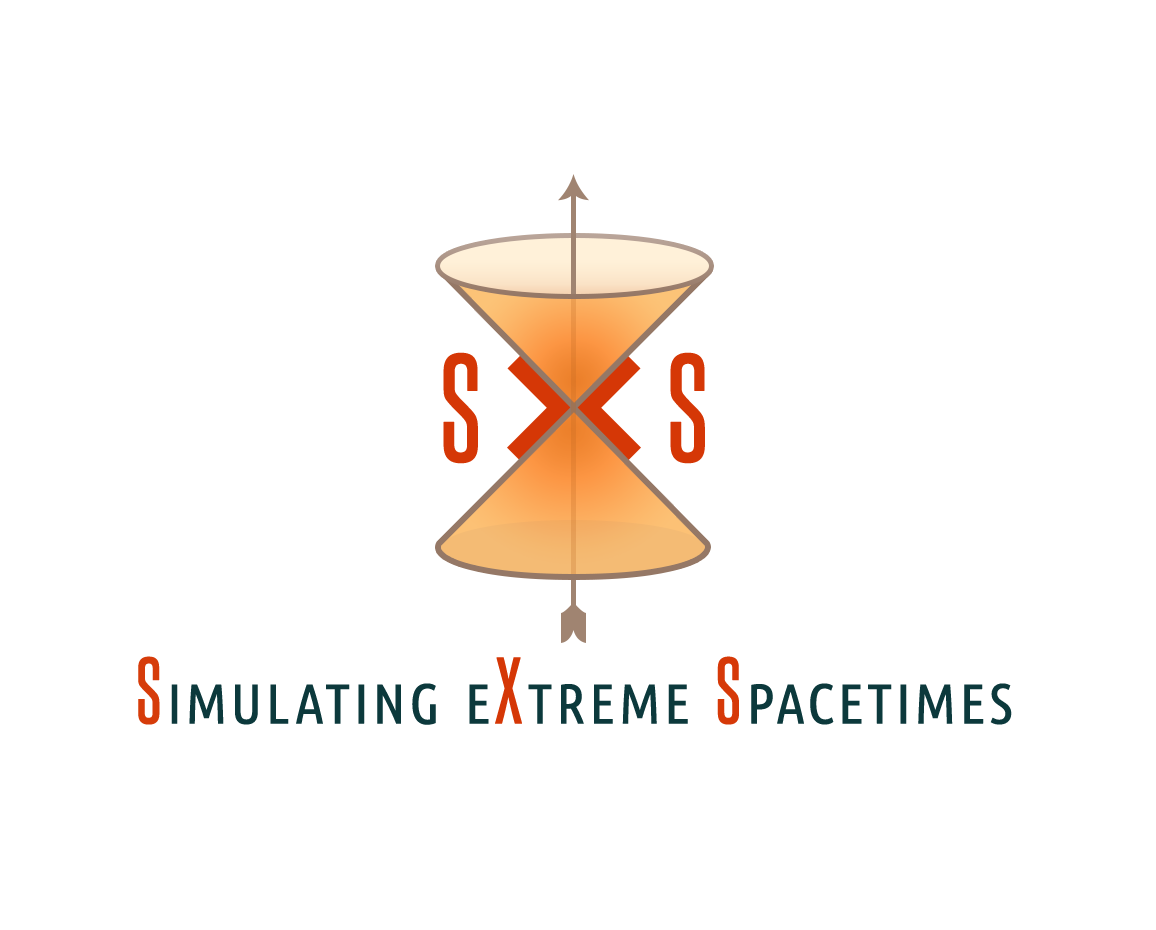
<style>
.page{position:relative;width:1156px;height:930px;background:#ffffff}
.page>*{position:absolute;margin:0}
.t1{font:130px "SteelfishRg-Regular";letter-spacing:0.23em;color:#d53706;font-weight:bold}
.t2{font:80px "UbuntuCondensed-Regular";letter-spacing:0.05em;color:#0c393c;font-variant:small-caps;font-weight:bold}
.t3{font:80px "UbuntuCondensed-Regular";letter-spacing:0.05em;color:#d63c0a;font-variant:small-caps;font-weight:bold}
.t4{font:80px "SteelfishRg-Regular";letter-spacing:0.05em;color:#d63c0a;font-variant:small-caps;font-weight:bold}
.t5{font:80px "SteelfishRg-Regular";letter-spacing:0.05em;color:#d53706;font-variant:small-caps;font-weight:bold}
.t6{font:80px "SteelfishRg-Regular";letter-spacing:0.05em;color:#d63908;font-variant:small-caps;font-weight:bold}
</style>
<div class="page">
<p class="t1" style="left:443px;top:352px;width:262px;height:112px">S   S</p>
<p class="t2" style="left:138px;top:656px;width:874px;height:69px"><span class="t3"> </span><span class="t4">S</span>imulating e<span class="t5">X</span>treme <span class="t6">S</span>pacetimes</p>
</div>
